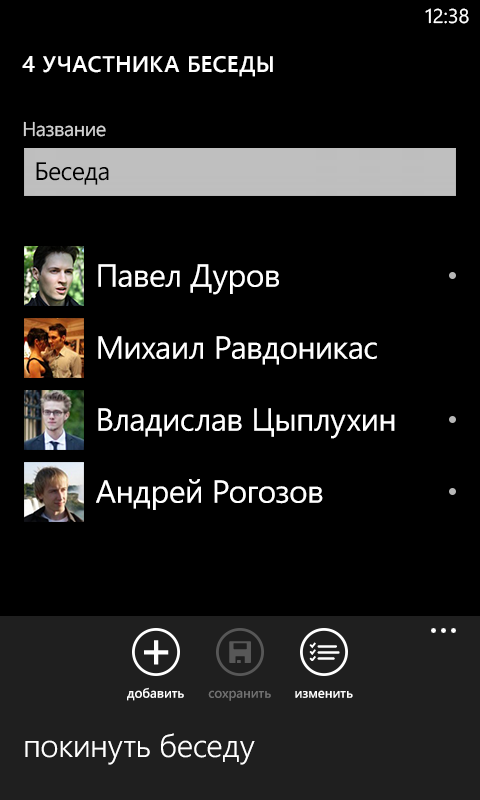
<style>
.page{position:relative;width:480px;height:800px;background:#000000}
.page>*{position:absolute;margin:0}
.t1{font:20px "SegoeWP";color:#ffffff}
.t2{font:22.7px "SegoeWP-Semibold";letter-spacing:0.025em;color:#ffffff;text-transform:uppercase}
.t3{font:25.4px "SegoeWP";letter-spacing:-0.025em;color:#000000}
.t4{font:32px "SegoeWP";letter-spacing:-0.01em;color:#ffffff}
.t5{font:13.3px "SegoeWP-Semibold";letter-spacing:-0.01em;color:#ffffff}
.t6{font:32px "SegoeWP-SemiLight";letter-spacing:-0.01em;color:#ffffff}
</style>
<div class="page">
<p class="t1" style="left:425px;top:8px;width:44px;height:16px">12:38</p>
<p class="t2" style="left:22px;top:56px;width:251px;height:21px">4 участника беседы</p>
<p class="t3" style="left:36px;top:162px;width:73px;height:23px">Беседа</p>
<p class="t4" style="left:98px;top:264px;width:181px;height:31px">Павел Дуров</p>
<p class="t4" style="left:98px;top:336px;width:279px;height:29px">Михаил Равдоникас</p>
<p class="t4" style="left:98px;top:408px;width:297px;height:31px">Владислав Цыплухин</p>
<p class="t4" style="left:96px;top:479px;width:227px;height:31px">Андрей Рогозов</p>
<p class="t5" style="left:127px;top:687px;width:57px;height:14px">добавить</p>
<p class="t5" style="left:295px;top:690px;width:58px;height:8px">изменить</p>
<p class="t6" style="left:25px;top:733px;width:230px;height:32px">покинуть беседу</p>
</div>
